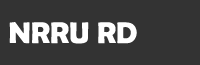
<style>
.page{position:relative;width:200px;height:65px;background:#333333}
.page>*{position:absolute;margin:0}
.t1{font:30px "BerlinSansFBDemi-Bold";color:#ffffff}
</style>
<div class="page">
<p class="t1" style="left:9px;top:22px;width:128px;height:22px">NRRU RD</p>
</div>
